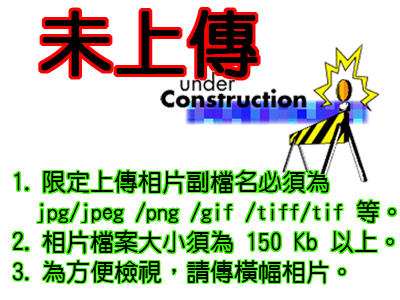
<style>
.page{position:relative;width:400px;height:300px;background:#ffffff}
.page>*{position:absolute;margin:0}
.t1{font:72px "DFYuan-W5-WIN-BF";color:#000000;font-weight:bold}
.t2{font:24px/30px "DFYuan-W5-WIN-BF";color:#000000}
.t3{font:22px/30px "DFYuan-W5-WIN-BF";color:#000000}
</style>
<div class="page">
<p class="t1" style="left:41px;top:10px;width:217px;height:68px">未上傳</p>
<p class="t2" style="left:12px;top:170px;width:384px;height:114px">1.限定上傳相片副檔名必須為<br>  <span class="t3">jpg/jpeg /png /gif /tiff/tif</span> 等。<br>2.相片檔案大小須為 150 Kb 以上。<br>3.為方便檢視，請傳橫幅相片。</p>
</div>
